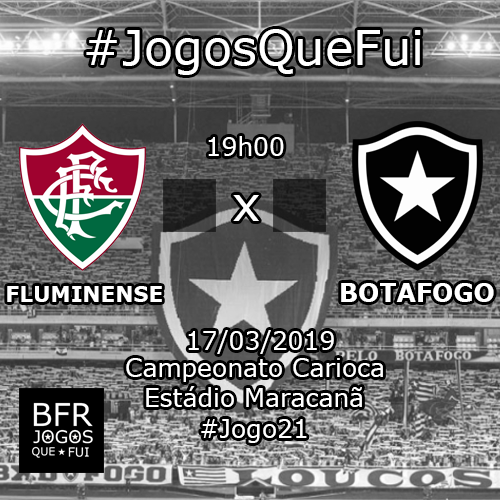
<style>
.page{position:relative;width:500px;height:500px}
.page>*{position:absolute;margin:0}
.t1{font:48px "Verdana";color:#ffffff}
.t2{font:25px "Verdana";color:#ffffff}
.t3{font:21.6px "Verdana-Bold";color:#ffffff}
.t4{font:25px "Verdana-Bold";color:#ffffff}
</style>
<div class="page">
<p class="t1" style="left:86px;top:29px;width:335px;height:46px">#JogosQueFui</p>
<p class="t2" style="left:208px;top:136px;width:76px;height:20px">19h00</p>
<p class="t1" style="left:233px;top:195px;width:26px;height:26px">x</p>
<p class="t3" style="left:7px;top:286px;width:155px;height:16px">FLUMINENSE</p>
<p class="t4" style="left:341px;top:283px;width:153px;height:19px">BOTAFOGO</p>
<p class="t2" style="left:188px;top:330px;width:146px;height:24px">17/03/2019</p>
<p class="t2" style="left:126px;top:358px;width:257px;height:24px">Campeonato Carioca</p>
<p class="t2" style="left:146px;top:386px;width:216px;height:21px">Estádio Maracanã</p>
<p class="t2" style="left:201px;top:419px;width:106px;height:24px">#Jogo21</p>
</div>
